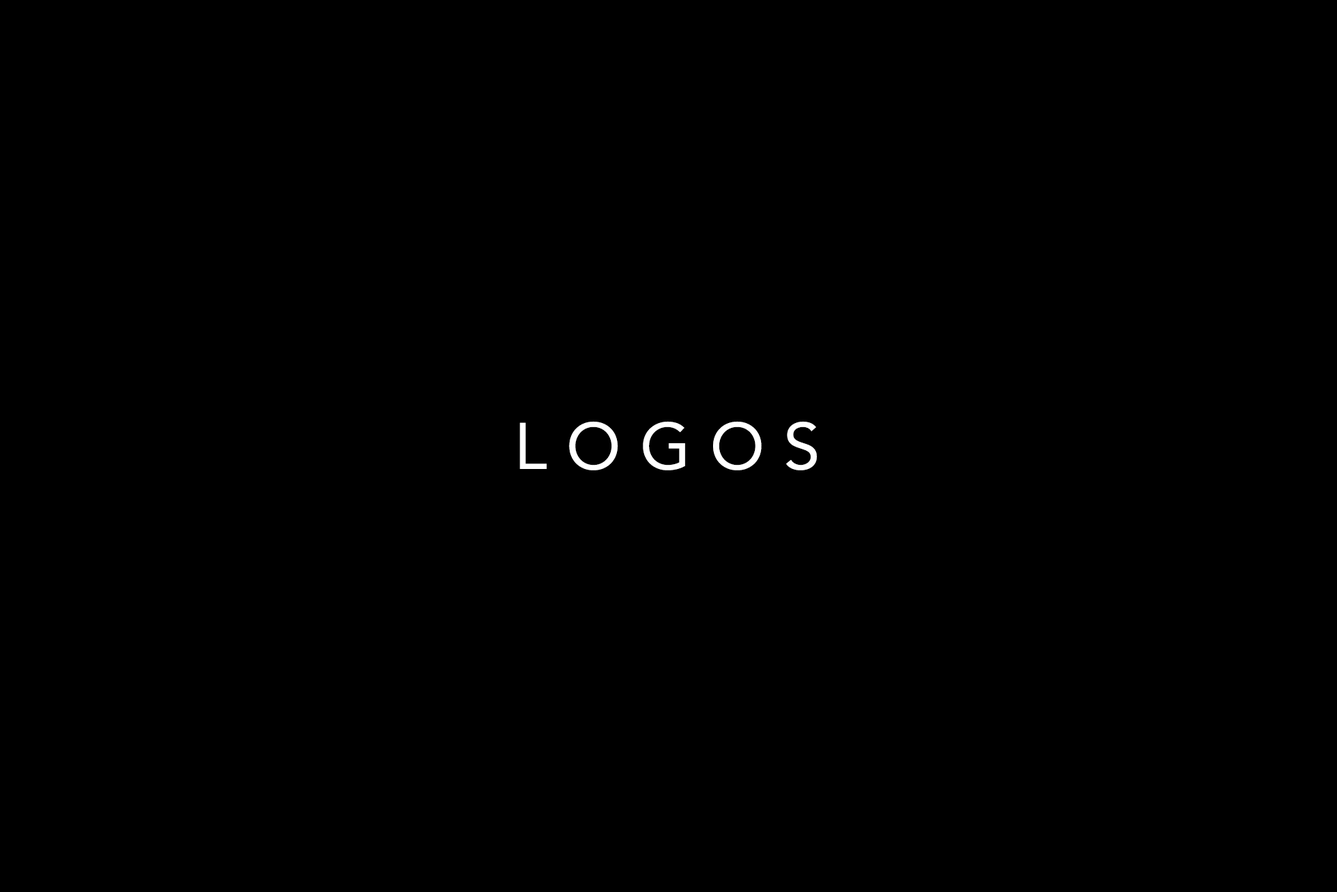
<style>
.page{position:relative;width:1337px;height:892px;background:#000000}
.page>*{position:absolute;margin:0}
.t1{font:65px "Avenir-Roman";letter-spacing:0.3em;color:#ffffff;text-transform:uppercase}
</style>
<div class="page">
<p class="t1" style="left:520px;top:421px;width:297px;height:49px">LOGOS</p>
</div>
